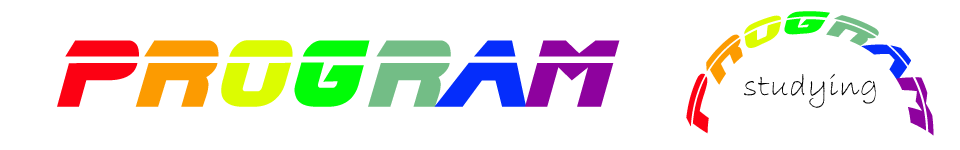
<style>
.page{position:relative;width:960px;height:150px;background:#ffffff}
.page>*{position:absolute;margin:0}
.t1{font:32px "BladeRunnerMovieFont";letter-spacing:0.025em;color:#fc0113}
.t2{font:32px "BladeRunnerMovieFont";letter-spacing:0.025em;color:#fc9b01}
.t3{font:32px "BladeRunnerMovieFont";letter-spacing:0.025em;color:#dcfc01}
.t4{font:32px "BladeRunnerMovieFont";letter-spacing:0.025em;color:#01fc07}
.t5{font:32px "BladeRunnerMovieFont";letter-spacing:0.025em;color:#73bd86}
.t6{font:32px "BladeRunnerMovieFont";letter-spacing:0.025em;color:#052dfb}
.t7{font:32px "BladeRunnerMovieFont";letter-spacing:0.025em;color:#8e029e}
.t8{font:96px "BladeRunnerMovieFont";letter-spacing:0.025em;color:#fc0113}
.t9{font:96px "BladeRunnerMovieFont";letter-spacing:0.025em;color:#fc9b01}
.t10{font:96px "BladeRunnerMovieFont";letter-spacing:0.025em;color:#dcfc01}
.t11{font:96px "BladeRunnerMovieFont";letter-spacing:0.025em;color:#01fc07}
.t12{font:96px "BladeRunnerMovieFont";letter-spacing:0.025em;color:#73bd86}
.t13{font:96px "BladeRunnerMovieFont";letter-spacing:0.025em;color:#052dfb}
.t14{font:96px "BladeRunnerMovieFont";letter-spacing:0.025em;color:#8e029e}
.t15{font:32px "BradleyHandITC";letter-spacing:0.025em;color:#000000}
</style>
<div class="page">
<p class="t1" style="left:686px;top:11px;width:248px;height:125px">p<span class="t2">r</span><span class="t3">o</span><span class="t4">g</span><span class="t5">r</span><span class="t6">a</span><span class="t7">m</span></p>
<p class="t8" style="left:57px;top:40px;width:563px;height:67px">p<span class="t9">r</span><span class="t10">o</span><span class="t11">g</span><span class="t12">r</span><span class="t13">a</span><span class="t14">m</span></p>
<p class="t15" style="left:744px;top:73px;width:132px;height:35px">studying</p>
</div>
